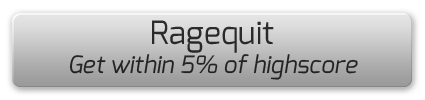
<style>
.page{position:relative;width:425px;height:100px}
.page>*{position:absolute;margin:0}
.t1{font:24px "Exo-Italic";color:#272727}
.t2{font:32px "Exo-Regular";color:#272727}
</style>
<div class="page">
<p class="t1" style="left:69px;top:20px;width:289px;height:60px;text-align:center"><span class="t2">Ragequit<br></span>Get within 5% of highscore</p>
</div>
